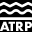
<style>
.page{position:relative;width:32px;height:32px;background:#000000}
.page>*{position:absolute;margin:0}
.t1{font:14px "FuturaPT-Bold";color:#ffffff}
</style>
<div class="page">
<p class="t1" style="left:0px;top:21px;width:32px;height:10px">ATRP</p>
</div>
